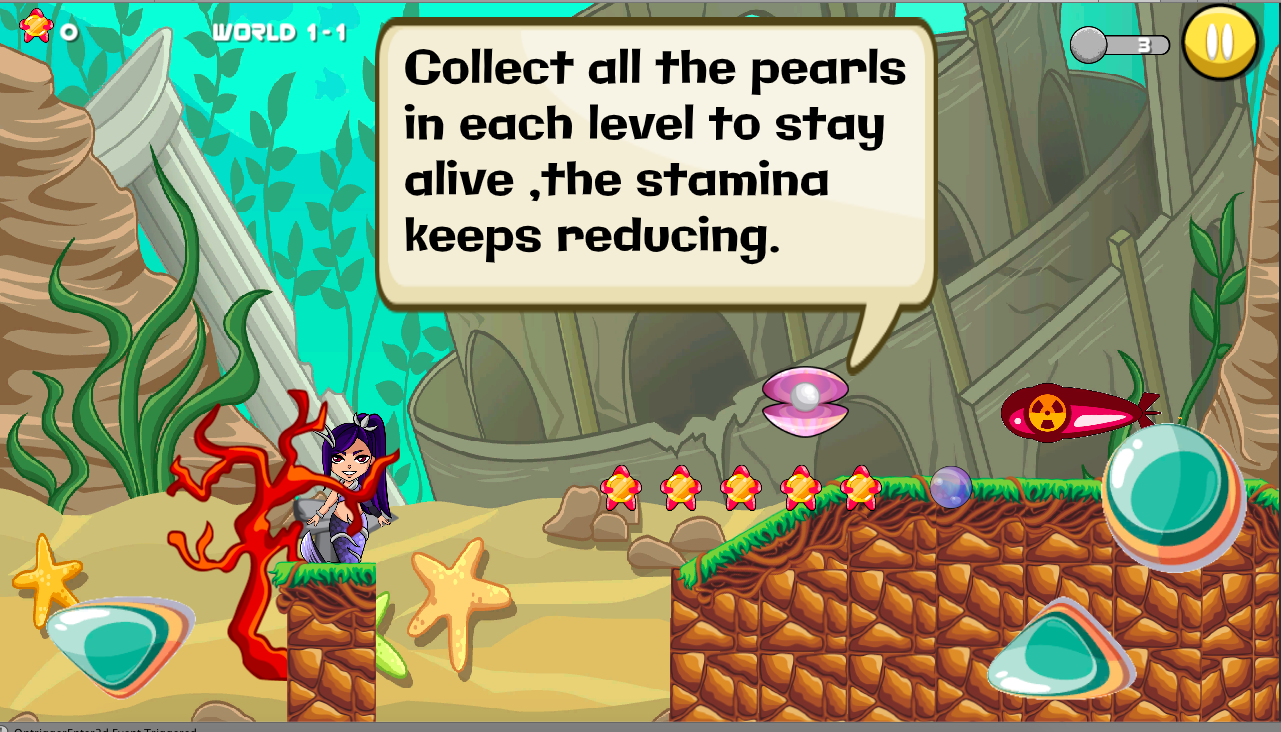
<style>
.page{position:relative;width:1281px;height:732px}
.page>*{position:absolute;margin:0}
.t1{font:46.5px "Galindo-Regular";color:#000000}
</style>
<div class="page">
<p class="t1" style="left:404px;top:48px;width:502px;height:217px">Collect all the pearls<br>in each level to stay<br>alive ,the stamina <br>keeps reducing.</p>
</div>
